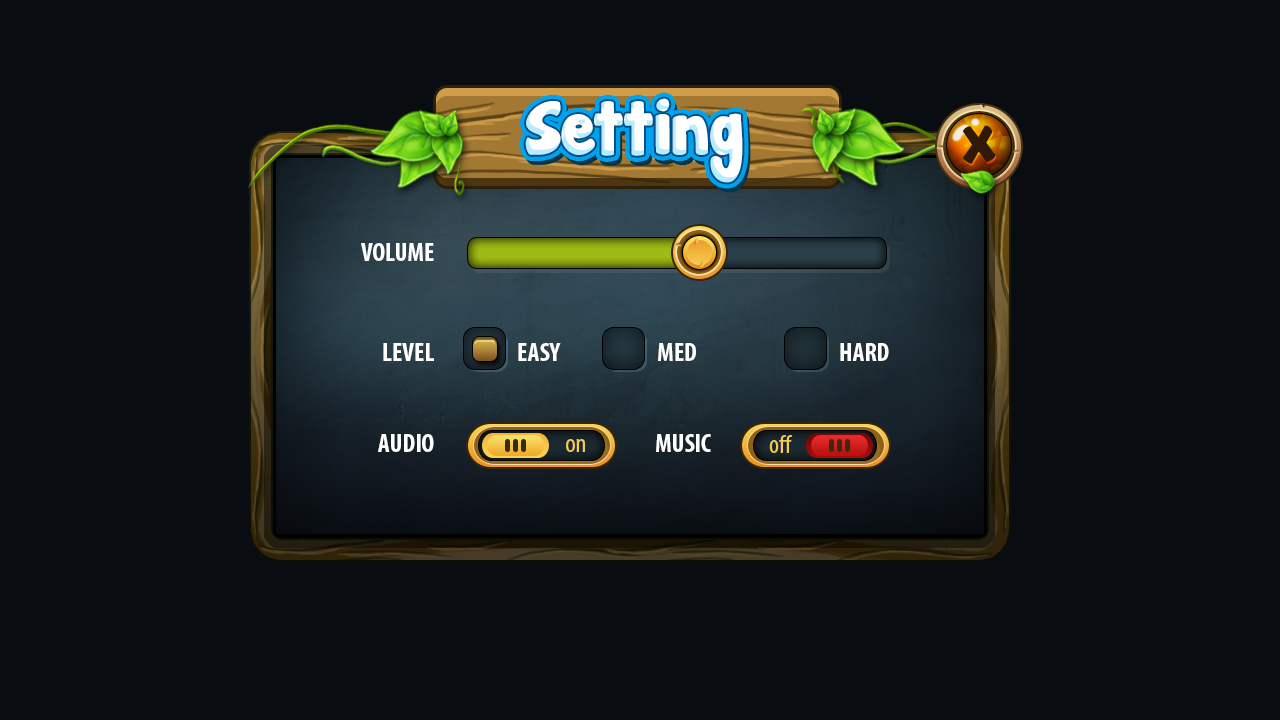
<style>
.page{position:relative;width:1280px;height:720px;background:#090d12}
.page>*{position:absolute;margin:0}
.t1{font:67.7px "JandaManateeSolid";color:#ffffff}
.t2{font:46.1px "JandaManateeSolid";color:#31190a}
.t3{font:26px "MyriadPro-BoldCond";color:#ffffff;text-transform:uppercase}
.t4{font:26px "MyriadPro-Cond";color:#f5cc52}
</style>
<div class="page">
<p class="t1" style="left:525px;top:98px;width:218px;height:85px">Setting</p>
<p class="t2" style="left:963px;top:125px;width:33px;height:39px">X</p>
<p class="t3" style="left:361px;top:243px;width:73px;height:18px">Volume</p>
<p class="t3" style="left:383px;top:343px;width:51px;height:18px">Level</p>
<p class="t3" style="left:518px;top:343px;width:43px;height:18px">easy</p>
<p class="t3" style="left:658px;top:343px;width:38px;height:18px">Med</p>
<p class="t3" style="left:840px;top:343px;width:49px;height:18px">Hard</p>
<p class="t3" style="left:378px;top:434px;width:56px;height:18px">Audio</p>
<p class="t3" style="left:656px;top:434px;width:55px;height:18px">Music</p>
<p class="t4" style="left:769px;top:435px;width:24px;height:18px">off</p>
<p class="t4" style="left:566px;top:439px;width:19px;height:13px">on</p>
</div>
